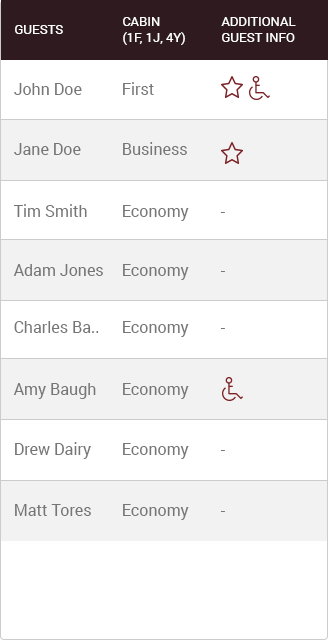
<style>
.page{position:relative;width:328px;height:640px;background:#ffffff}
.page>*{position:absolute;margin:0}
.t1{font:13px "Roboto-Regular";color:#ffffff;text-transform:uppercase}
.t2{font:16px "Roboto-Regular";color:#767676}
.t3{font:16px "Roboto-Regular";color:#7b2326}
</style>
<div class="page">
<p class="t1" style="left:123px;top:17px;width:62px;height:28px">Cabin<br>(1F, 1J, 4Y)</p>
<p class="t1" style="left:221px;top:17px;width:75px;height:25px">Additional<br>Guest Info</p>
<p class="t1" style="left:15px;top:25px;width:48px;height:9px">Guests</p>
<p class="t2" style="left:14px;top:83px;width:68px;height:12px">John Doe</p>
<p class="t2" style="left:123px;top:82px;width:31px;height:13px">First</p>
<p class="t2" style="left:14px;top:143px;width:67px;height:12px">Jane Doe</p>
<p class="t2" style="left:123px;top:142px;width:64px;height:13px">Business</p>
<p class="t3" style="left:220px;top:150px;width:5px;height:1px">-</p>
<p class="t2" style="left:13px;top:204px;width:74px;height:13px">Tim Smith</p>
<p class="t2" style="left:123px;top:205px;width:66px;height:16px">Economy</p>
<p class="t2" style="left:220px;top:212px;width:5px;height:1px">-</p>
<p class="t2" style="left:13px;top:264px;width:90px;height:12px">Adam Jones</p>
<p class="t2" style="left:123px;top:264px;width:66px;height:16px">Economy</p>
<p class="t2" style="left:220px;top:271px;width:5px;height:1px">-</p>
<p class="t2" style="left:14px;top:321px;width:85px;height:12px">Charles Ba..</p>
<p class="t2" style="left:123px;top:321px;width:66px;height:16px">Economy</p>
<p class="t2" style="left:220px;top:328px;width:5px;height:1px">-</p>
<p class="t2" style="left:13px;top:383px;width:83px;height:16px">Amy Baugh</p>
<p class="t2" style="left:123px;top:383px;width:66px;height:16px">Economy</p>
<p class="t2" style="left:15px;top:442px;width:76px;height:17px">Drew Dairy</p>
<p class="t2" style="left:123px;top:443px;width:66px;height:16px">Economy</p>
<p class="t2" style="left:220px;top:450px;width:5px;height:1px">-</p>
<p class="t2" style="left:15px;top:504px;width:76px;height:12px">Matt Tores</p>
<p class="t2" style="left:123px;top:504px;width:66px;height:16px">Economy</p>
<p class="t2" style="left:220px;top:511px;width:5px;height:1px">-</p>
</div>
